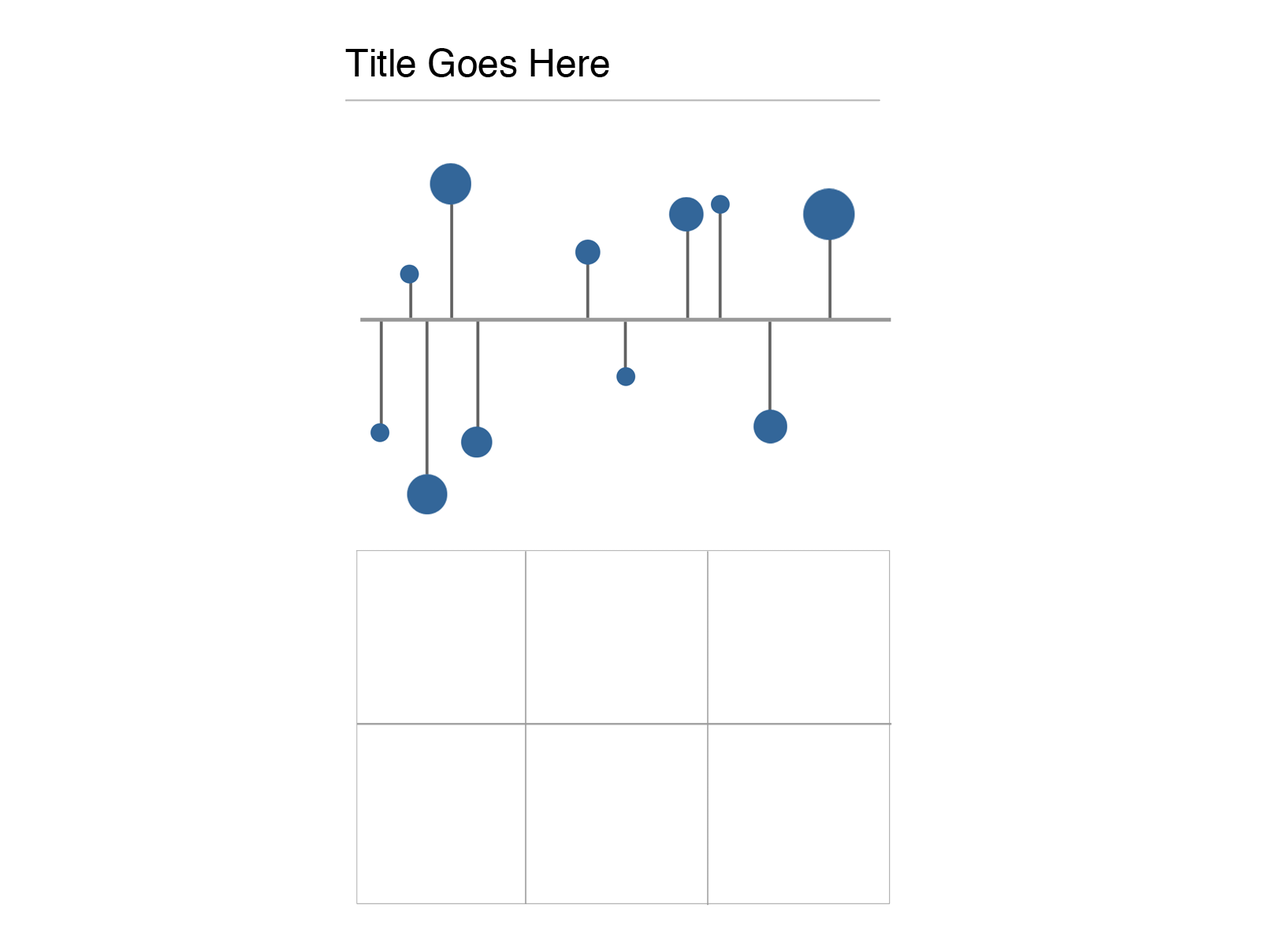
<style>
.page{position:relative;width:1261px;height:946px;background:#ffffff}
.page>*{position:absolute;margin:0}
.t1{font:37.8px "Helvetica";color:#000000}
</style>
<div class="page">
<p class="t1" style="left:345px;top:48px;width:264px;height:29px">Title Goes Here</p>
</div>
